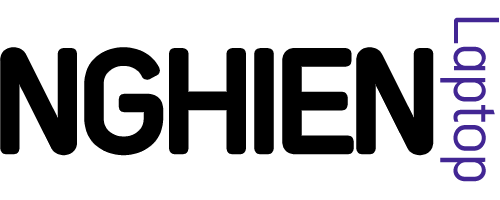
<style>
.page{position:relative;width:500px;height:200px;background:#ffffff}
.page>*{position:absolute;margin:0}
.t1{font:62.5px "SVN-Arch";color:#422694}
.t2{font:133.3px "SVN-Arch";color:#000000}
</style>
<div class="page">
<p class="t1" style="left:440px;top:17px;width:59px;height:165px;rotate:90deg">Laptop</p>
<p class="t2" style="left:5px;top:52px;width:424px;height:99px">NGHIEN</p>
</div>
